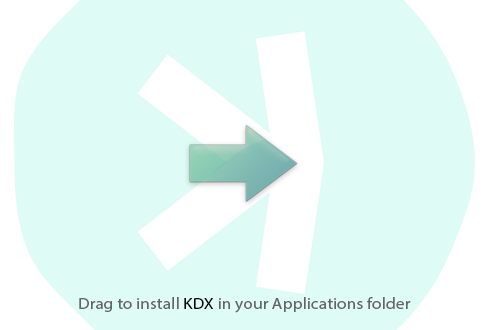
<style>
.page{position:relative;width:485px;height:330px;background:#defbf6}
.page>*{position:absolute;margin:0}
.t1{font:15.9px "MyriadPro-Regular";letter-spacing:0.004em;color:#656464;scale:1.09 1}
.t2{font:15.9px "MyriadPro-Regular";letter-spacing:0.004em;color:#000000;scale:1.09 1}
</style>
<div class="page">
<p class="t1" style="left:79px;top:297px;width:332px;height:16px">Drag to install<span class="t2"> KDX </span>in your Applications folder</p>
</div>
